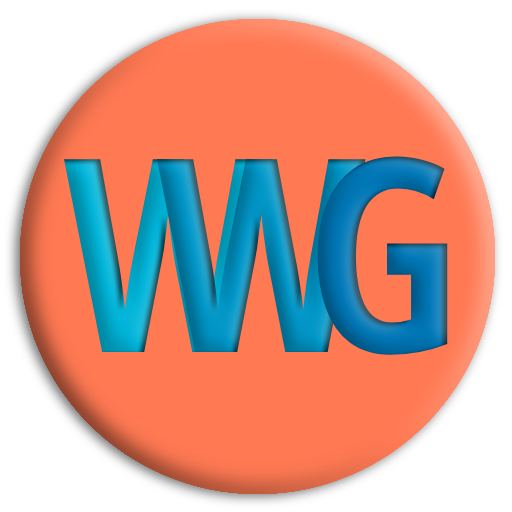
<style>
.page{position:relative;width:512px;height:512px;background:#ff7953}
.page>*{position:absolute;margin:0}
.t1{font:270px "NotoSans-ExtraCondensedBold"}
</style>
<div class="page">
<p class="t1" style="left:64px;top:159px;width:209px;height:193px">W</p>
<p class="t1" style="left:157px;top:159px;width:209px;height:193px">W</p>
<p class="t1" style="left:317px;top:156px;width:131px;height:199px">G</p>
</div>
